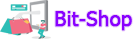
<style>
.page{position:relative;width:139px;height:39px;background:#ffffff}
.page>*{position:absolute;margin:0}
.t1{font:20px "Tahoma";color:#8a00ff;font-weight:bold}
</style>
<div class="page">
<p class="t1" style="left:55px;top:10px;width:77px;height:21px">Bit-Shop</p>
</div>
